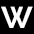
<style>
.page{position:relative;width:34px;height:34px;background:#000000}
.page>*{position:absolute;margin:0}
.t1{font:30px "Raleway-Bold";color:#ffffff;text-transform:uppercase}
</style>
<div class="page">
<p class="t1" style="left:1px;top:6px;width:32px;height:22px">w</p>
</div>
